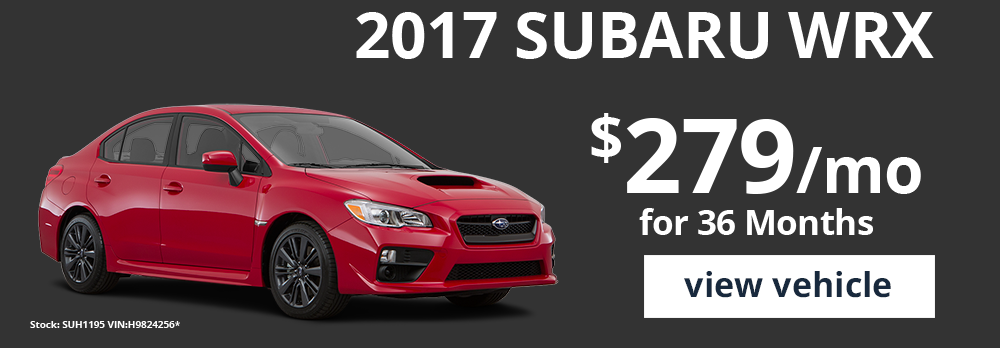
<style>
.page{position:relative;width:1000px;height:348px;background:#333333}
.page>*{position:absolute;margin:0}
.t1{font:110px "OpenSans-Bold";letter-spacing:-0.01em;color:#ffffff}
.t2{font:34.6px/42.4px "OpenSans-Bold";letter-spacing:-0.01em;color:#ffffff}
.t3{font:102.8px/42.4px "OpenSans-Bold";letter-spacing:-0.01em;color:#ffffff}
.t4{font:63.8px/42.4px "OpenSans-Bold";letter-spacing:-0.01em;color:#ffffff}
.t5{font:34.2px "OpenSans-Bold";color:#18293d}
.t6{font:10px "OpenSans-Bold";letter-spacing:-0.01em;color:#ffffff}
</style>
<div class="page">
<p class="t1" style="left:356px;top:12px;width:578px;height:47px">2017 SUBARU WRX</p>
<p class="t2" style="left:591px;top:113px;width:330px;height:122px;text-align:center"><span class="t3">$279</span><span class="t4">/mo<br></span>for 36 Months</p>
<p class="t5" style="left:684px;top:271px;width:207px;height:27px">view vehicle</p>
<p class="t6" style="left:30px;top:321px;width:150px;height:7px">Stock: SUH1195 VIN:H9824256*</p>
</div>
